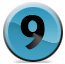
<style>
.page{position:relative;width:65px;height:64px;background:#ffffff}
.page>*{position:absolute;margin:0}
.t1{font:48px "TrebuchetMS-Bold";color:#000000;font-weight:bold}
</style>
<div class="page">
<p class="t1" style="left:20px;top:15px;width:25px;height:35px">9</p>
</div>
